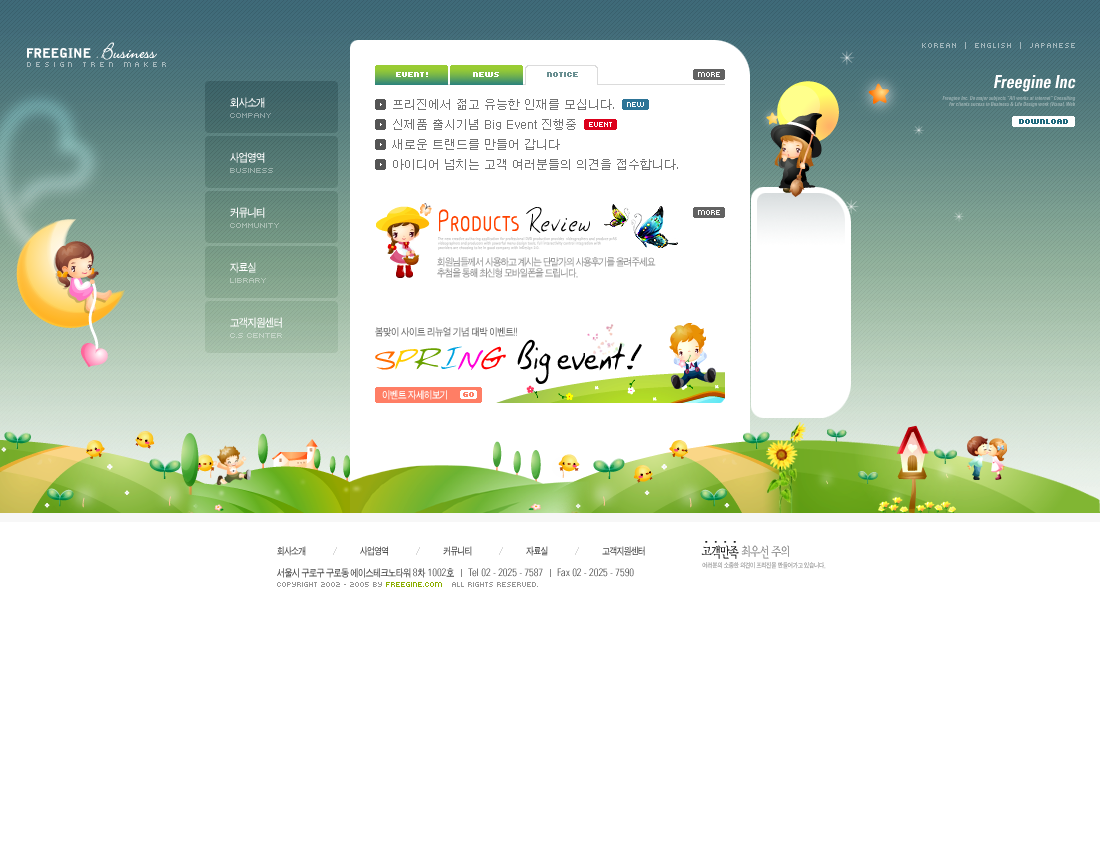
<style>
.page{position:relative;width:1100px;height:850px;background:#ffffff}
.page>*{position:absolute;margin:0}
.t1{font:13px "BellGothicBT-Black";color:#ffffff}
.t2{font:20px "Elegant";color:#ffffff}
.t3{font:20px "Elegant";color:#ffffff;font-weight:bold}
.t4{font:8px "Kroeger0556";color:#a3b8be}
.t5{font:8px "Kroeger0556";letter-spacing:0.36em;color:#a5b9be}
.t6{font:8px "Kroeger0555";color:#ffffff;font-weight:bold}
.t7{font:8px "Kroeger0555";color:#698f91;font-weight:bold}
.t8{font:18px "Univers-CondensedBold";color:#ffffff;font-style:italic;scale:0.9 1}
.t9{font:11.5px/55px "SandTg";letter-spacing:-0.05em;color:#ffffff;scale:0.9 1}
.t10{font:12px/20px "Dotum";color:#737373}
.t11{font:5.5px/6px "Univers-CondensedBold";color:#94aaab;font-style:italic;scale:0.9 1}
.t12{font:8px "Kroeger0555";color:#1d687c;font-weight:bold}
.t13{font:30px "CineplexLT-RegularSmallCaps";color:#ff4200;scale:0.8 1}
.t14{font:30px "ChicksHand-Plain";letter-spacing:0.08em;color:#000000;scale:0.8 1}
.t15{font:30px "ChicksHand-Plain";letter-spacing:0.12em;color:#000000;scale:0.8 1}
.t16{font:10.5px/11px "SandTg";letter-spacing:-0.075em;color:#989898;scale:0.9 1}
.t17{font:10.5px "SandTg";letter-spacing:-0.05em;color:#717171;scale:0.9 1}
.t18{font:40.5px "GinosHand-Plain";letter-spacing:-0.02em;color:#000000;scale:0.95 1}
.t19{font:42.5px "FentonsHand-Plain";letter-spacing:-0.02em;color:#ff6c00;scale:0.95 1}
.t20{font:42.5px "FentonsHand-Plain";letter-spacing:-0.02em;color:#ffcc00;scale:0.95 1}
.t21{font:42.5px "FentonsHand-Plain";letter-spacing:-0.02em;color:#6aa100;scale:0.95 1}
.t22{font:42.5px "FentonsHand-Plain";letter-spacing:-0.02em;color:#00a3e0;scale:0.95 1}
.t23{font:42.5px "FentonsHand-Plain";letter-spacing:-0.02em;color:#ff00d8;scale:0.95 1}
.t24{font:42.5px "FentonsHand-Plain";letter-spacing:-0.02em;color:#ff0000;scale:0.95 1}
.t25{font:40.5px "FentonsHand-Plain";letter-spacing:-0.02em;color:#000000;font-weight:bold;scale:0.95 1}
.t26{font:10.5px "SandTg";letter-spacing:-0.05em;color:#ffffff;scale:0.9 1}
.t27{font:13.8px "YMjO23";letter-spacing:-0.14em;color:#838383;text-transform:uppercase;scale:0.8 1}
.t28{font:13.8px "YMjO23";letter-spacing:-0.14em;color:#000000;text-transform:uppercase;scale:0.8 1}
.t29{font:10px "SandTg";letter-spacing:-0.05em;color:#494949;text-transform:uppercase;scale:0.85 1}
.t30{font:10.5px "Univers-CondensedLight";color:#4a4a4a}
.t31{font:10.5px "SandTg";letter-spacing:-0.05em;color:#4a4a4a;scale:0.85 1}
.t32{font:10.5px "SandTg";letter-spacing:-0.02em;color:#4a4a4a;scale:0.85 1}
.t33{font:6.9px "SandTg";letter-spacing:-0.04em;text-transform:uppercase;scale:0.85 1}
.t34{font:8px "Kroeger0555";color:#969696}
.t35{font:8px "Kroeger0555";color:#8bae00}
</style>
<div class="page">
<p class="t1" style="left:27px;top:42px;width:130px;height:18px">FREEGINE <span class="t2">. </span><span class="t3">Business</span></p>
<p class="t4" style="left:922px;top:42px;width:153px;height:7px">KOREAN  |  ENGLISH  |  JAPANESe</p>
<p class="t5" style="left:27px;top:62px;width:139px;height:5px">design tren maker</p>
<p class="t6" style="left:396px;top:72px;width:32px;height:5px">event!</p>
<p class="t6" style="left:473px;top:72px;width:26px;height:5px">news</p>
<p class="t7" style="left:547px;top:72px;width:31px;height:5px">notice</p>
<p class="t8" style="left:994px;top:75px;width:82px;height:17px">Freegine Inc</p>
<p class="t9" style="left:230px;top:97px;width:52px;height:231px">회사소개<br>사업영역<br>커뮤니티<br>자료실<br>고객지원센터</p>
<p class="t10" style="left:392px;top:99px;width:286px;height:71px">프리진에서 젊고 유능한 인재를 모십니다.<br>신제품 출시기념 Big Event 진행중<br>새로운 트랜드를 만들어 갑니다<br>아이디어 넘치는 고객 여러분들의 의견을 접수합니다.</p>
<p class="t11" style="left:942px;top:96px;width:134px;height:11px;text-align:right">Freegine Inc. Do major subjects “All works at internet” Consulting<br>for clients sucess in Business &amp; Life Design work (Visual, Web</p>
<p class="t12" style="left:1019px;top:119px;width:49px;height:5px">download</p>
<p class="t13" style="left:439px;top:207px;width:151px;height:26px">Products <span class="t14">R</span><span class="t15">e</span><span class="t14">view</span></p>
<p class="t16" style="left:437px;top:257px;width:219px;height:21px">회원님들께서 사용하고 계시는 단말가의 사용후기를 올려주세요<br>추첨을 통해 최신형 모바일폰을 드립니다.</p>
<p class="t17" style="left:375px;top:327px;width:142px;height:10px">봄맞이 사이트 리뉴얼 기념 대박 이벤트!!</p>
<p class="t18" style="left:375px;top:339px;width:267px;height:45px"><span class="t19">s</span><span class="t20">p</span><span class="t21">r</span><span class="t22">i</span><span class="t23">n</span><span class="t24">g </span>Big event<span class="t25">!</span></p>
<p class="t26" style="left:382px;top:390px;width:65px;height:10px">이벤트 자세히보기</p>
<p class="t27" style="left:701px;top:545px;width:88px;height:14px"><span class="t28">고객만족 </span>최우선 주의</p>
<p class="t29" style="left:277px;top:546px;width:368px;height:10px">회사소개                             사업영역                             커뮤니티                             자료실                             고객지원센터</p>
<p class="t30" style="left:277px;top:568px;width:357px;height:10px"><span class="t31">서울시 구로구 구로동 에이스테크노타워 </span>8<span class="t32">차 </span>1002<span class="t32">호</span>      Tel 02 - 2025 - 7587      Fax 02 - 2025 - 7590</p>
<p class="t33" style="left:702px;top:562px;width:124px;height:7px">여러분의 소중한 의견이 프리진을 만들어가고 있습니다.</p>
<p class="t34" style="left:277px;top:582px;width:261px;height:5px">Copyright 2002 - 2005 by <span class="t35">freegine.com</span>   All rights reserved.</p>
</div>
